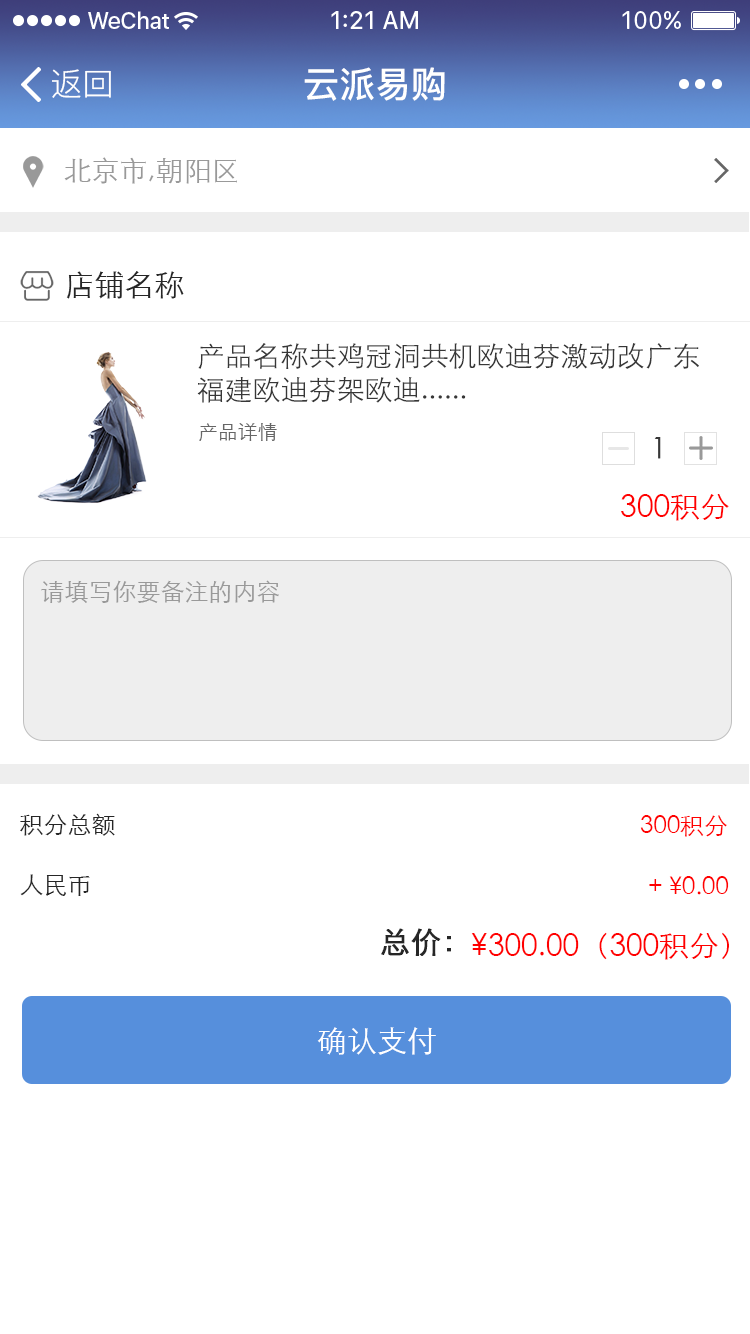
<style>
.page{position:relative;width:750px;height:1334px;background:#ffffff}
.page>*{position:absolute;margin:0}
.t1{font:32px "PingFang-SC-Regular";color:#ffffff}
.t2{font:36px "PingFang-SC-Bold";color:#ffffff}
.t3{font:28px "STXihei";color:#999999}
.t4{font:30px "STXihei";color:#262626}
.t5{font:28px "STXihei";color:#373737}
.t6{font:20px "STXihei";color:#666666}
.t7{font:30px "STXihei";color:#373737}
.t8{font:30px "STXihei";color:#ff0000}
.t9{font:24px "STXihei";color:#999999}
.t10{font:24px "STXihei";color:#262626}
.t11{font:24px "STXihei";color:#ff0000}
.t12{font:30px "STXihei";color:#262626;font-weight:bold}
.t13{font:30px "STXihei";color:#ffffff}
</style>
<div class="page">
<p class="t1" style="left:52px;top:69px;width:59px;height:29px">返回</p>
<p class="t2" style="left:304px;top:67px;width:141px;height:34px">云派易购</p>
<p class="t3" style="left:64px;top:157px;width:173px;height:27px">北京市,朝阳区</p>
<p class="t4" style="left:66px;top:271px;width:118px;height:28px">店铺名称</p>
<p class="t5" style="left:197px;top:343px;width:502px;height:60px">产品名称共鸡冠洞共机欧迪芬激动改广东福建欧迪芬架欧迪......</p>
<p class="t6" style="left:199px;top:423px;width:78px;height:18px">产品详情</p>
<p class="t7" style="left:654px;top:437px;width:7px;height:22px">1</p>
<p class="t8" style="left:621px;top:494px;width:108px;height:27px">300积分</p>
<p class="t9" style="left:41px;top:580px;width:238px;height:23px">请填写你要备注的内容</p>
<p class="t10" style="left:20px;top:813px;width:95px;height:23px">积分总额</p>
<p class="t11" style="left:640px;top:815px;width:87px;height:22px">300积分</p>
<p class="t10" style="left:20px;top:874px;width:70px;height:22px">人民币</p>
<p class="t11" style="left:649px;top:876px;width:80px;height:19px">+ ¥0.00</p>
<p class="t12" style="left:381px;top:928px;width:70px;height:28px">总价：</p>
<p class="t8" style="left:471px;top:932px;width:258px;height:28px">¥300.00（300积分）</p>
<p class="t13" style="left:317px;top:1027px;width:119px;height:28px">确认支付</p>
</div>
